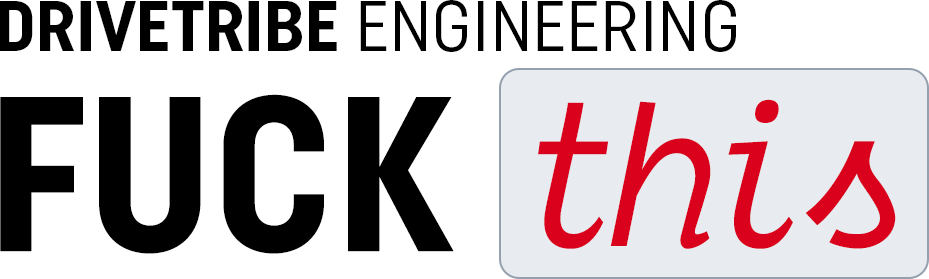
<style>
.page{position:relative;width:929px;height:279px;background:#ffffff}
.page>*{position:absolute;margin:0}
.t1{font:72px "UniformCondensedRegular-Regular";color:#000000}
.t2{font:72px "UniformCondensedBold-Regular";color:#000000}
.t3{font:220px "UniformCondensedBold-Regular";color:#000000}
.t4{font:220px "DankMono-Italic";letter-spacing:-0.12em;color:#d9011c}
</style>
<div class="page">
<p class="t1" style="left:0px;top:0px;width:736px;height:52px"><span class="t2">DRIVETRIBE</span> ENGINEERING</p>
<p class="t3" style="left:0px;top:94px;width:454px;height:160px">FUCK</p>
<p class="t4" style="left:538px;top:99px;width:358px;height:150px">this</p>
</div>
